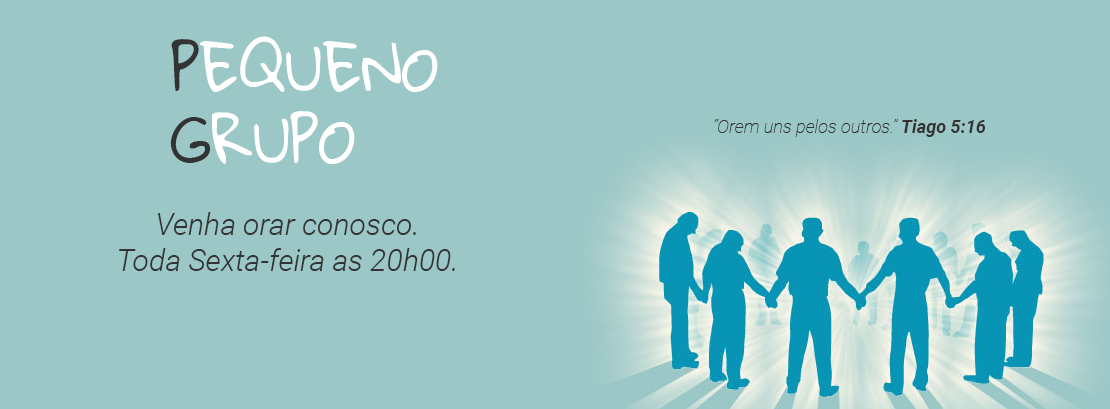
<style>
.page{position:relative;width:1110px;height:409px;background:#9bc7c6}
.page>*{position:absolute;margin:0}
.t1{font:60px "GloriaHallelujah";color:#ffffff}
.t2{font:60px "GloriaHallelujah";color:#333333}
.t3{font:18px "Roboto-ThinItalic";color:#333333}
.t4{font:18px "Roboto-BoldItalic";color:#333333}
.t5{font:30px "Roboto-LightItalic";color:#333333}
</style>
<div class="page">
<p class="t1" style="left:170px;top:36px;width:268px;height:128px"><span class="t2">P</span>EQUENO <br><span class="t2">G</span>RUPO</p>
<p class="t3" style="left:714px;top:119px;width:272px;height:18px">“Orem uns pelos outros.” <span class="t4">Tiago 5:16</span></p>
<p class="t5" style="left:119px;top:212px;width:336px;height:59px;text-align:center">Venha orar conosco.<br>Toda Sexta-feira as 20h00.</p>
</div>
